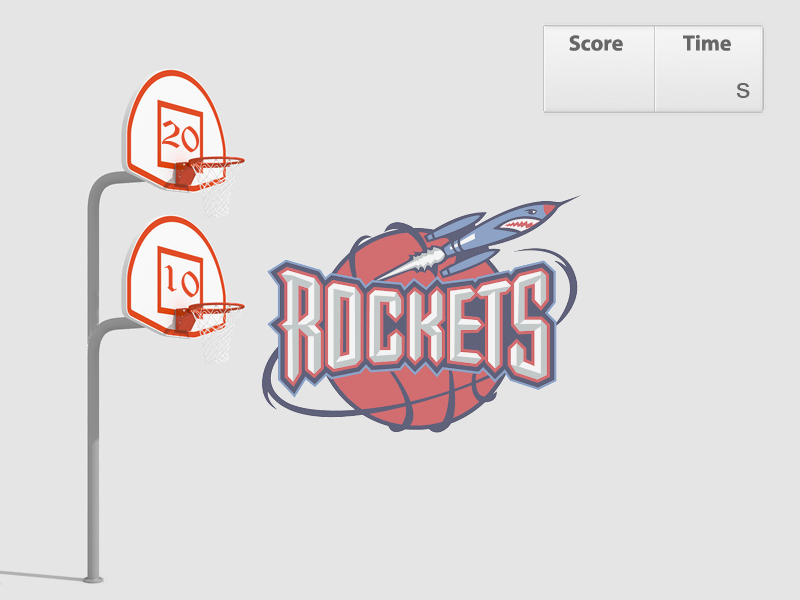
<style>
.page{position:relative;width:800px;height:600px;background:#e5e5e5}
.page>*{position:absolute;margin:0}
.t1{font:22px "MyriadPro-Bold";color:#676767}
.t2{font:27.5px "Mangal";color:#676767}
.t3{font:38.5px "OldEnglishTextMT";color:#e34926;scale:1.04 1}
</style>
<div class="page">
<p class="t1" style="left:569px;top:35px;width:54px;height:16px">Score</p>
<p class="t1" style="left:683px;top:35px;width:48px;height:16px">Time</p>
<p class="t2" style="left:736px;top:83px;width:14px;height:15px">s</p>
<p class="t3" style="left:162px;top:120px;width:37px;height:33px;rotate:17deg">20</p>
<p class="t3" style="left:164px;top:265px;width:35px;height:33px;rotate:17deg">10</p>
</div>
